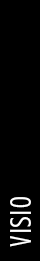
<style>
.page{position:relative;width:40px;height:261px;background:#000000}
.page>*{position:absolute;margin:0}
.t1{font:28px "FuturaStd-CondensedLight";letter-spacing:0.06em;color:#ffffff;text-transform:uppercase}
</style>
<div class="page">
<p class="t1" style="left:10px;top:197px;width:21px;height:50px;rotate:-90deg">Visio</p>
</div>
